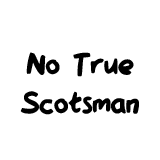
<style>
.page{position:relative;width:160px;height:160px;background:#ffffff}
.page>*{position:absolute;margin:0}
.t1{font:31.9px "QAReports";color:#000000}
</style>
<div class="page">
<p class="t1" style="left:20px;top:52px;width:119px;height:63px;text-align:center">No True<br>Scotsman</p>
</div>
